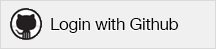
<style>
.page{position:relative;width:216px;height:49px;background:#f0f0f0}
.page>*{position:absolute;margin:0}
.t1{font:17px "HelveticaNeue";letter-spacing:-0.02em}
.t2{font:17px "HelveticaNeue";letter-spacing:-0.02em;color:#000000}
</style>
<div class="page">
<p class="t1" style="left:51px;top:18px;width:140px;height:15px">Login with LinkedIn</p>
<p class="t1" style="left:51px;top:18px;width:152px;height:15px">Login with Facebook</p>
<p class="t1" style="left:51px;top:18px;width:127px;height:15px">Login with Twitter</p>
<p class="t1" style="left:51px;top:18px;width:132px;height:15px">Login with Google</p>
<p class="t1" style="left:51px;top:18px;width:151px;height:15px">Login with Instagram</p>
<p class="t2" style="left:51px;top:18px;width:128px;height:15px">Login with Github</p>
</div>
